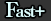
<style>
.page{position:relative;width:51px;height:21px;background:#333333}
.page>*{position:absolute;margin:0}
.t1{font:16px "RyuminPro-ExBold";letter-spacing:-0.08em;color:#e0ffff}
.t2{font:20px "RyuminPro-ExBold";letter-spacing:-0.08em;color:#e0ffff}
</style>
<div class="page">
<p class="t1" style="left:6px;top:2px;width:39px;height:16px"><span class="t2">F</span>ast+</p>
</div>
